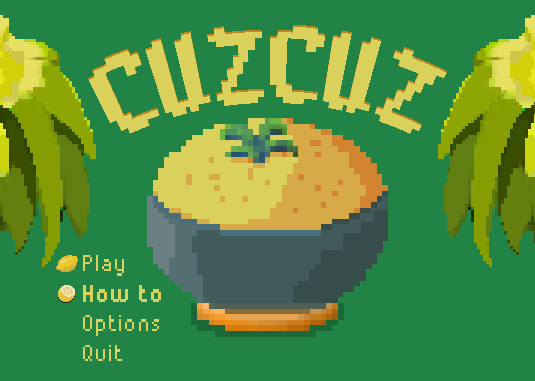
<style>
.page{position:relative;width:535px;height:381px;background:#218346}
.page>*{position:absolute;margin:0}
.t1{font:90px "8-bitLimit(BRK)";letter-spacing:0.05em;color:#dad15c}
.t2{font:24px/30px "Munro";letter-spacing:0.05em;color:#dad15c}
.t3{font:24px/30px "Munro";letter-spacing:0.05em;color:#dad15c;font-weight:bold}
</style>
<div class="page">
<p class="t1" style="left:88px;top:25px;width:359px;height:109px">CUZCUZ</p>
<p class="t2" style="left:83px;top:255px;width:78px;height:106px">Play<br><span class="t3">How to<br></span>Options<br>Quit</p>
</div>
